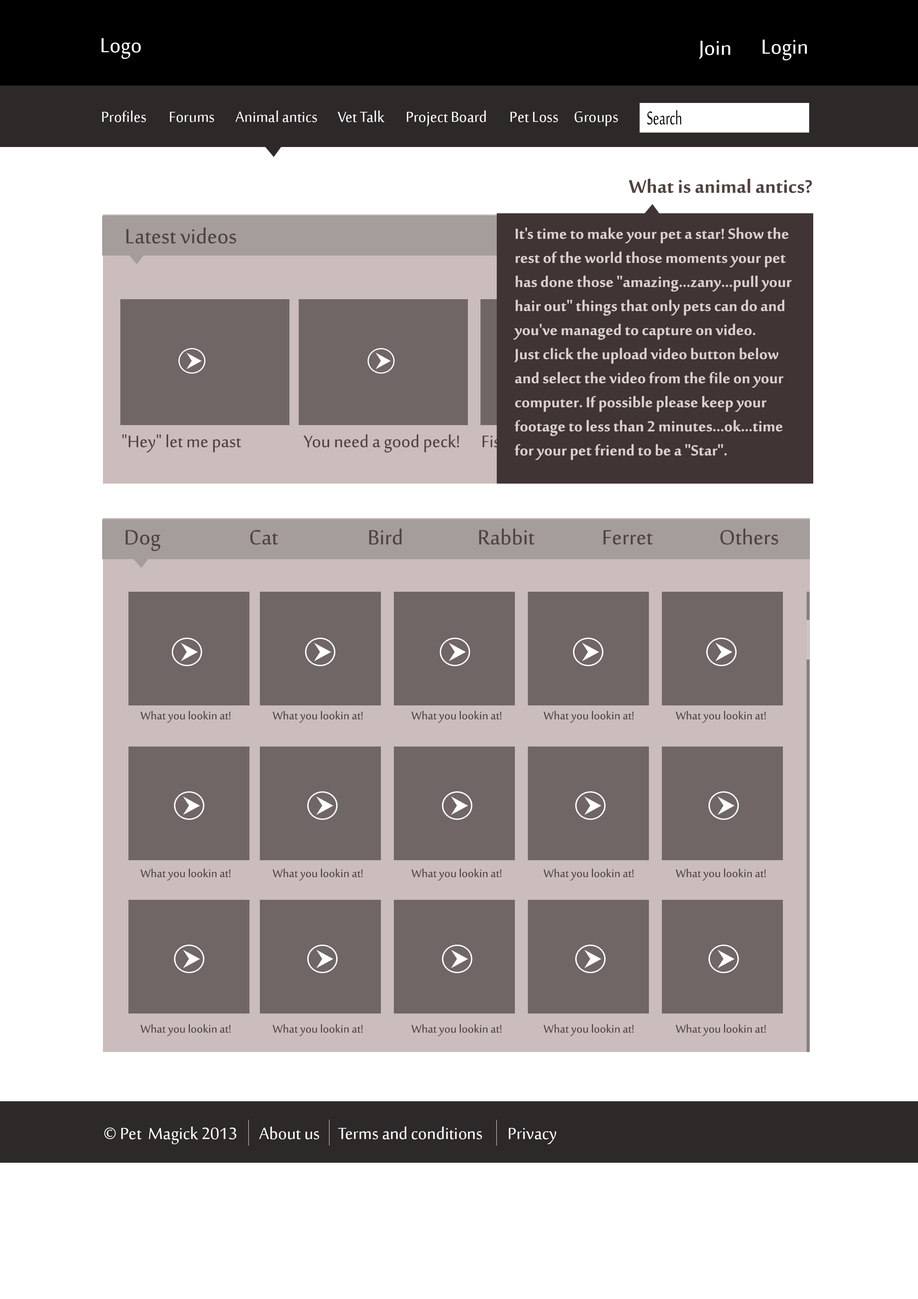
<style>
.page{position:relative;width:918px;height:1299px;background:#ffffff}
.page>*{position:absolute;margin:0}
.t1{font:27.8px "SakkalMajalla";color:#ffffff}
.t2{font:19.8px "SakkalMajalla";color:#ffffff}
.t3{font:25.6px "SakkalMajalla";color:#000000;scale:0.67 1}
.t4{font:25.1px "SakkalMajallaBold";color:#504342}
.t5{font:28.3px "SakkalMajalla";color:#504342}
.t6{font:20.1px "SakkalMajallaBold";color:#d9cfcf}
.t7{font:22.9px "SakkalMajalla";color:#504342}
.t8{font:15.1px "SakkalMajalla";color:#524747}
.t9{font:22.1px "SakkalMajalla";color:#ffffff}
</style>
<div class="page">
<p class="t1" style="left:101px;top:38px;width:40px;height:21px">Logo</p>
<p class="t1" style="left:699px;top:41px;width:31px;height:18px">Join</p>
<p class="t1" style="left:763px;top:40px;width:44px;height:20px">Login</p>
<p class="t2" style="left:102px;top:110px;width:44px;height:12px">Profiles</p>
<p class="t2" style="left:170px;top:112px;width:44px;height:10px">Forums</p>
<p class="t2" style="left:235px;top:110px;width:82px;height:12px">Animal antics</p>
<p class="t2" style="left:338px;top:110px;width:47px;height:12px">Vet Talk</p>
<p class="t2" style="left:407px;top:110px;width:79px;height:16px">Project Board</p>
<p class="t2" style="left:511px;top:112px;width:47px;height:10px">Pet Loss</p>
<p class="t2" style="left:575px;top:111px;width:43px;height:15px">Groups</p>
<p class="t3" style="left:647px;top:110px;width:35px;height:15px">Search</p>
<p class="t4" style="left:629px;top:178px;width:183px;height:15px">What is animal antics?</p>
<p class="t5" style="left:126px;top:227px;width:110px;height:17px">Latest videos</p>
<p class="t6" style="left:513px;top:227px;width:279px;height:233px">It's time to make your pet a star! Show the rest of the world those moments your pet has done those "amazing...zany...pull your hair out" things that only pets can do and you've managed to capture on video. <br>Just click the upload video button below and select the video from the file on your computer. If possible please keep your footage to less than 2 minutes...ok...time for your pet friend to be a "Star".</p>
<p class="t7" style="left:122px;top:434px;width:119px;height:18px">"Hey" let me past</p>
<p class="t7" style="left:304px;top:434px;width:155px;height:18px">You need a good peck!</p>
<p class="t5" style="left:126px;top:530px;width:34px;height:21px">Dog</p>
<p class="t5" style="left:250px;top:530px;width:28px;height:15px">Cat</p>
<p class="t5" style="left:369px;top:528px;width:33px;height:17px">Bird</p>
<p class="t5" style="left:479px;top:528px;width:56px;height:17px">Rabbit</p>
<p class="t5" style="left:603px;top:530px;width:50px;height:15px">Ferret</p>
<p class="t5" style="left:720px;top:528px;width:58px;height:17px">Others</p>
<p class="t8" style="left:140px;top:710px;width:91px;height:13px">What you lookin at!</p>
<p class="t8" style="left:272px;top:710px;width:91px;height:13px">What you lookin at!</p>
<p class="t8" style="left:411px;top:710px;width:91px;height:13px">What you lookin at!</p>
<p class="t8" style="left:543px;top:710px;width:91px;height:13px">What you lookin at!</p>
<p class="t8" style="left:676px;top:710px;width:90px;height:13px">What you lookin at!</p>
<p class="t8" style="left:140px;top:868px;width:91px;height:12px">What you lookin at!</p>
<p class="t8" style="left:272px;top:868px;width:91px;height:12px">What you lookin at!</p>
<p class="t8" style="left:411px;top:868px;width:91px;height:12px">What you lookin at!</p>
<p class="t8" style="left:543px;top:868px;width:91px;height:12px">What you lookin at!</p>
<p class="t8" style="left:676px;top:868px;width:90px;height:12px">What you lookin at!</p>
<p class="t8" style="left:140px;top:1024px;width:91px;height:12px">What you lookin at!</p>
<p class="t8" style="left:272px;top:1024px;width:91px;height:12px">What you lookin at!</p>
<p class="t8" style="left:411px;top:1024px;width:91px;height:12px">What you lookin at!</p>
<p class="t8" style="left:543px;top:1024px;width:91px;height:12px">What you lookin at!</p>
<p class="t8" style="left:676px;top:1024px;width:90px;height:12px">What you lookin at!</p>
<p class="t9" style="left:104px;top:1126px;width:133px;height:18px">© Pet  Magick 2013</p>
<p class="t9" style="left:259px;top:1126px;width:60px;height:13px">About us</p>
<p class="t9" style="left:338px;top:1126px;width:144px;height:13px">Terms and conditions</p>
<p class="t9" style="left:509px;top:1128px;width:47px;height:16px">Privacy</p>
</div>
